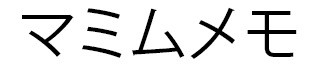
<style>
.page{position:relative;width:320px;height:64px;background:#ffffff}
.page>*{position:absolute;margin:0}
.t1{font:60px "KozGoPr6N-Regular";color:#000000}
</style>
<div class="page">
<p class="t1" style="left:22px;top:7px;width:275px;height:52px">マミムメモ</p>
</div>
